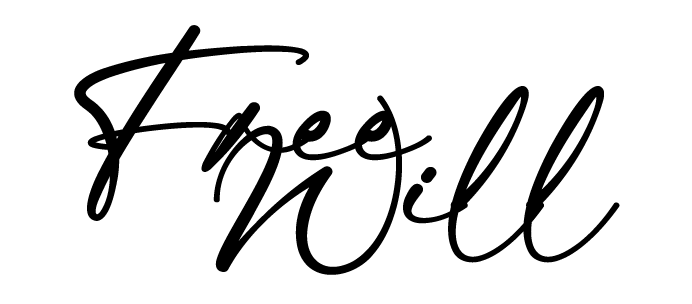
<style>
.page{position:relative;width:692px;height:304px;background:#ffffff}
.page>*{position:absolute;margin:0}
.t1{font:194.4px "PartsoldRegular";letter-spacing:-0.05em;color:#000000;scale:1.06 1}
</style>
<div class="page">
<p class="t1" style="left:74px;top:25px;width:358px;height:196px">Free</p>
<p class="t1" style="left:213px;top:86px;width:407px;height:189px">Will</p>
</div>
